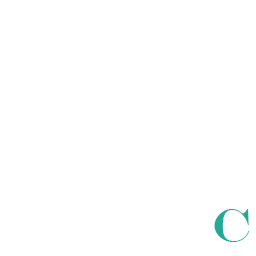
<style>
.page{position:relative;width:256px;height:256px;background:#ffffff}
.page>*{position:absolute;margin:0}
.t1{font:48px "EngraversMT";color:#21ab96}
</style>
<div class="page">
<p class="t1" style="left:214px;top:209px;width:36px;height:33px">C</p>
</div>
